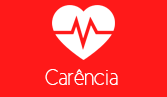
<style>
.page{position:relative;width:167px;height:97px;background:#ff1919}
.page>*{position:absolute;margin:0}
.t1{font:22.7px "CicleFina";color:#ffffff}
</style>
<div class="page">
<p class="t1" style="left:45px;top:69px;width:73px;height:16px">Carência</p>
</div>
